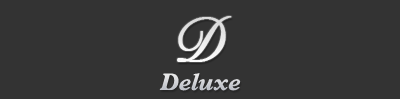
<style>
.page{position:relative;width:400px;height:99px;background:#333333}
.page>*{position:absolute;margin:0}
.t1{font:60px "SnellRoundhand";color:#ffffff;font-weight:bold}
.t2{font:24px "MPlantin-BoldItalic";color:#cdcfd4}
</style>
<div class="page">
<p class="t1" style="left:177px;top:16px;width:55px;height:46px">D</p>
<p class="t2" style="left:159px;top:73px;width:82px;height:18px">Deluxe</p>
</div>
